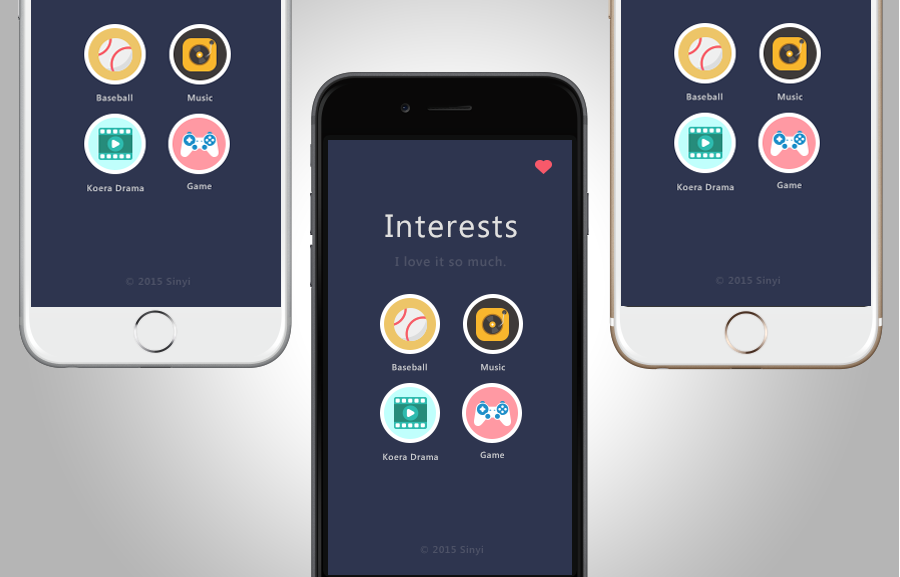
<style>
.page{position:relative;width:900px;height:577px;background:#2e354f}
.page>*{position:absolute;margin:0}
.t1{font:32px "SegoeUI";letter-spacing:0.05em;color:#e0e0e0}
.t2{font:13px "SegoeUI-SemiBold";letter-spacing:0.05em;color:#4d5267}
.t3{font:8.7px "SegoeUI-SemiBold";letter-spacing:0.05em;color:#c8cacf}
.t4{font:10px "SegoeUI-SemiBold";letter-spacing:0.05em;color:#4d5267}
</style>
<div class="page">
<p class="t1" style="left:385px;top:214px;width:132px;height:24px">Interests</p>
<p class="t2" style="left:395px;top:256px;width:111px;height:11px">I love it so much.</p>
<p class="t3" style="left:392px;top:363px;width:35px;height:8px">Baseball</p>
<p class="t3" style="left:481px;top:363px;width:24px;height:8px">Music</p>
<p class="t3" style="left:383px;top:453px;width:55px;height:7px">Koera Drama</p>
<p class="t3" style="left:480px;top:451px;width:24px;height:7px">Game</p>
<p class="t4" style="left:420px;top:545px;width:63px;height:11px">© 2015 Sinyi</p>
</div>
